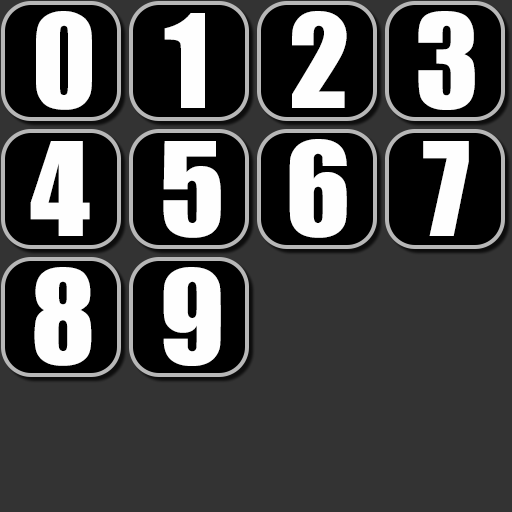
<style>
.page{position:relative;width:512px;height:512px;background:#333333}
.page>*{position:absolute;margin:0}
.t1{font:120px "Impact";color:#fefefe}
</style>
<div class="page">
<p class="t1" style="left:36px;top:11px;width:56px;height:99px">0</p>
<p class="t1" style="left:164px;top:13px;width:41px;height:95px">1</p>
<p class="t1" style="left:292px;top:11px;width:55px;height:97px">2</p>
<p class="t1" style="left:418px;top:11px;width:57px;height:99px">3</p>
<p class="t1" style="left:30px;top:141px;width:60px;height:95px">4</p>
<p class="t1" style="left:163px;top:141px;width:58px;height:97px">5</p>
<p class="t1" style="left:289px;top:139px;width:58px;height:99px">6</p>
<p class="t1" style="left:423px;top:141px;width:46px;height:95px">7</p>
<p class="t1" style="left:34px;top:267px;width:58px;height:99px">8</p>
<p class="t1" style="left:163px;top:267px;width:58px;height:99px">9</p>
</div>
